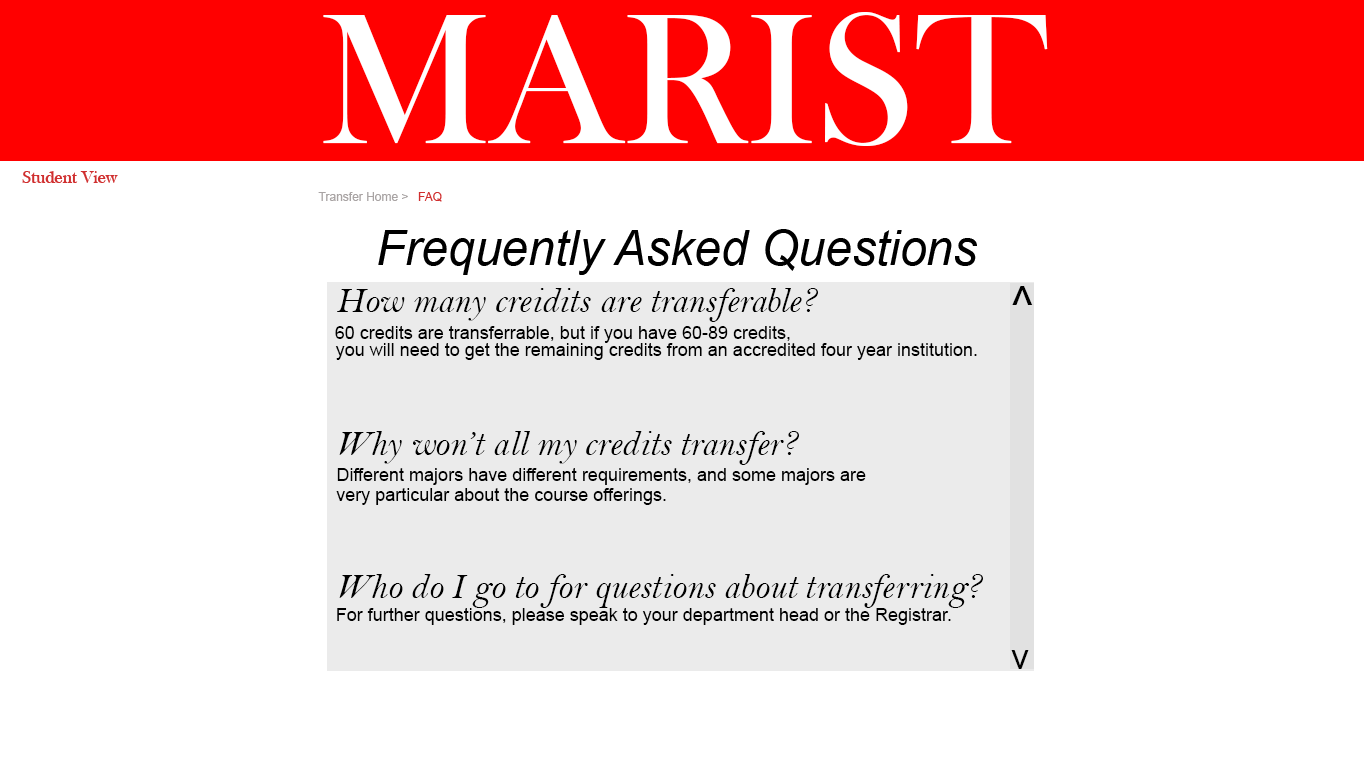
<style>
.page{position:relative;width:1366px;height:768px;background:#ffffff}
.page>*{position:absolute;margin:0}
.t1{font:192px "BaskOldFace";color:#ffffff}
.t2{font:18px "BaskOldFace";color:#d02f2f}
.t3{font:12px "ArialMT";color:#a9a4a4}
.t4{font:12px "ArialMT";color:#d02f2f}
.t5{font:48px "Arial-ItalicMT";color:#000000}
.t6{font:36px "BellMTItalic";color:#000000}
.t7{font:48px "ArialMT";color:#000000}
.t8{font:18px "ArialMT";color:#000000}
.t9{font:36px "ArialMT";color:#000000}
</style>
<div class="page">
<p class="t1" style="left:323px;top:12px;width:725px;height:134px">MARIST</p>
<p class="t2" style="left:22px;top:171px;width:96px;height:12px">Student View</p>
<p class="t3" style="left:318px;top:192px;width:90px;height:9px">Transfer Home &gt;</p>
<p class="t4" style="left:418px;top:192px;width:24px;height:10px">FAQ</p>
<p class="t5" style="left:378px;top:229px;width:599px;height:46px">Frequently Asked Questions</p>
<p class="t6" style="left:337px;top:288px;width:481px;height:34px">How many creidits are transferable?</p>
<p class="t7" style="left:1012px;top:286px;width:21px;height:19px">^</p>
<p class="t8" style="left:335px;top:326px;width:455px;height:17px">60 credits are transferrable, but if you have 60-89 credits,</p>
<p class="t8" style="left:335px;top:343px;width:642px;height:17px">you will need to get the remaining credits from an accredited four year institution.</p>
<p class="t6" style="left:339px;top:431px;width:460px;height:34px">Why won’t all my credits transfer?</p>
<p class="t8" style="left:337px;top:468px;width:529px;height:17px">Different majors have different requirements, and some majors are</p>
<p class="t8" style="left:336px;top:488px;width:330px;height:17px">very particular about the course offerings.</p>
<p class="t6" style="left:339px;top:574px;width:644px;height:34px">Who do I go to for questions about transferring?</p>
<p class="t8" style="left:337px;top:608px;width:614px;height:17px">For further questions, please speak to your department head or the Registrar.</p>
<p class="t9" style="left:1011px;top:650px;width:18px;height:19px">v</p>
</div>
